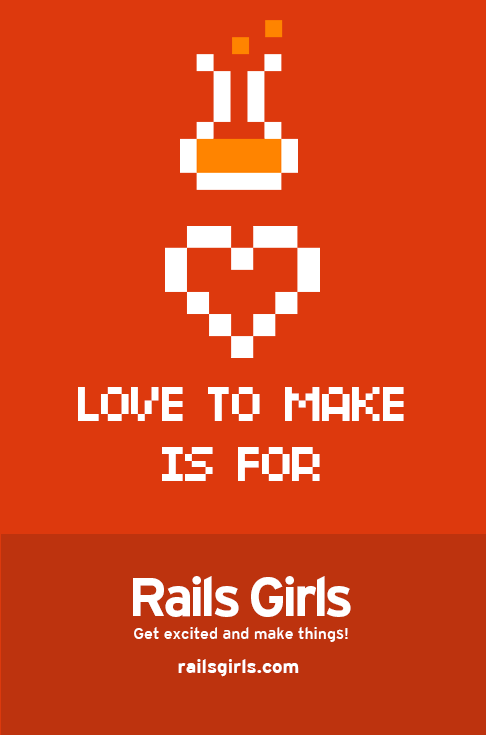
<style>
.page{position:relative;width:486px;height:735px;background:#dd390d}
.page>*{position:absolute;margin:0}
.t1{font:54.9px/60px "04b03";letter-spacing:-0.075em;color:#ffffff}
.t2{font:54.6px "Interstate-Bold";letter-spacing:-0.075em;color:#ffffff}
.t3{font:16px "Interstate-Regular";color:#ffffff}
.t4{font:19px/34px "Interstate-Bold";color:#ffffff}
</style>
<div class="page">
<p class="t1" style="left:78px;top:387px;width:326px;height:94px;text-align:center">LOVE TO MAKE<br>IS FOR</p>
<p class="t2" style="left:133px;top:576px;width:218px;height:41px">Rails Girls</p>
<p class="t3" style="left:134px;top:627px;width:214px;height:50px;text-align:center">Get excited and make things!<br><span class="t4">railsgirls.com</span></p>
</div>
